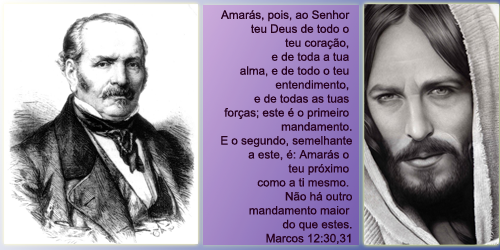
<style>
.page{position:relative;width:500px;height:250px}
.page>*{position:absolute;margin:0}
.t1{font:11.6px "ArialMT";color:#27021f}
</style>
<div class="page">
<p class="t1" style="left:221px;top:10px;width:131px;height:234px;text-align:right">Amarás, pois, ao Senhor <br>teu Deus de todo o <br>teu coração, <br>e de toda a tua <br>alma, e de todo o teu <br>entendimento, <br>e de todas as tuas <br>forças; este é o primeiro <br>mandamento.<br>E o segundo, semelhante<br> a este, é: Amarás o <br>teu próximo <br>como a ti mesmo. <br>Não há outro<br> mandamento maior <br>do que estes.<br>Marcos 12:30,31</p>
</div>
